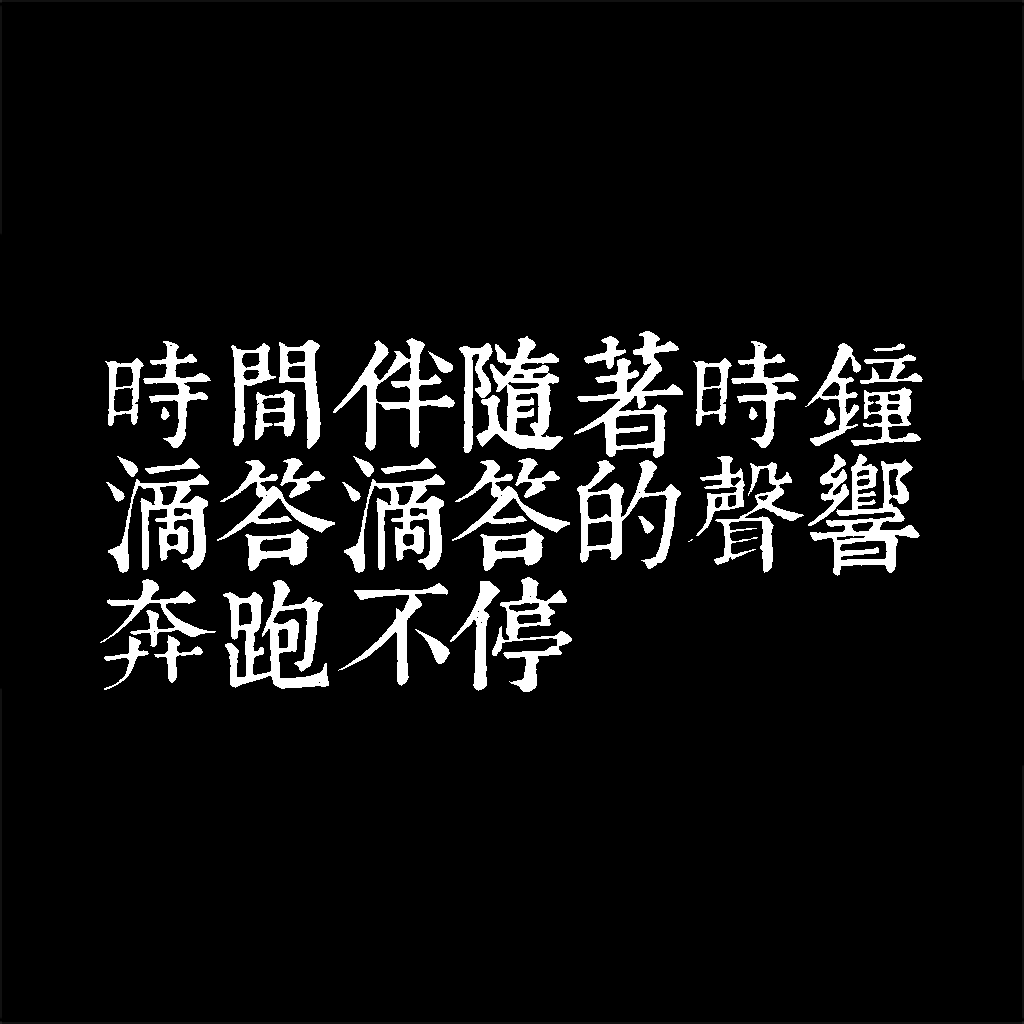
<style>
.page{position:relative;width:1024px;height:1024px;background:#000000}
.page>*{position:absolute;margin:0}
.t1{font:120px/120px "TpldKhangXiDictTrial";letter-spacing:-0.02em;color:#ffffff}
</style>
<div class="page">
<p class="t1" style="left:100px;top:331px;width:823px;height:361px">時間伴隨著時鐘<br>滴答滴答的聲響<br>奔跑不停</p>
</div>
